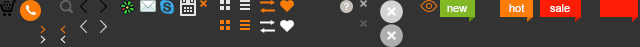
<style>
.page{position:relative;width:640px;height:47px;background:#333333}
.page>*{position:absolute;margin:0}
.t1{font:11px "ArialMT";color:#ffffff}
</style>
<div class="page">
<p class="t1" style="left:447px;top:6px;width:21px;height:6px">new</p>
<p class="t1" style="left:509px;top:4px;width:16px;height:8px">hot</p>
<p class="t1" style="left:550px;top:4px;width:20px;height:8px">sale</p>
</div>
